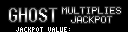
<style>
.page{position:relative;width:128px;height:32px;background:#000000}
.page>*{position:absolute;margin:0}
.t1{font:18px "Terminal"}
.t2{font:10px "Terminal"}
</style>
<div class="page">
<p class="t1" style="left:9px;top:8px;width:48px;height:14px">GHOST</p>
<p class="t2" style="left:62px;top:7px;width:59px;height:7px">MULTIPLIES</p>
<p class="t2" style="left:71px;top:16px;width:41px;height:7px">JACKPOT</p>
</div>
